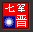
<style>
.page{position:relative;width:33px;height:32px;background:#f20000}
.page>*{position:absolute;margin:0}
.t1{font:10.4px "SimSun";color:#ffffff}
.t2{font:11.7px "SimSun";color:#ffffff}
</style>
<div class="page">
<p class="t1" style="left:5px;top:4px;width:20px;height:8px">七军</p>
<p class="t2" style="left:16px;top:15px;width:11px;height:12px">晋</p>
</div>
